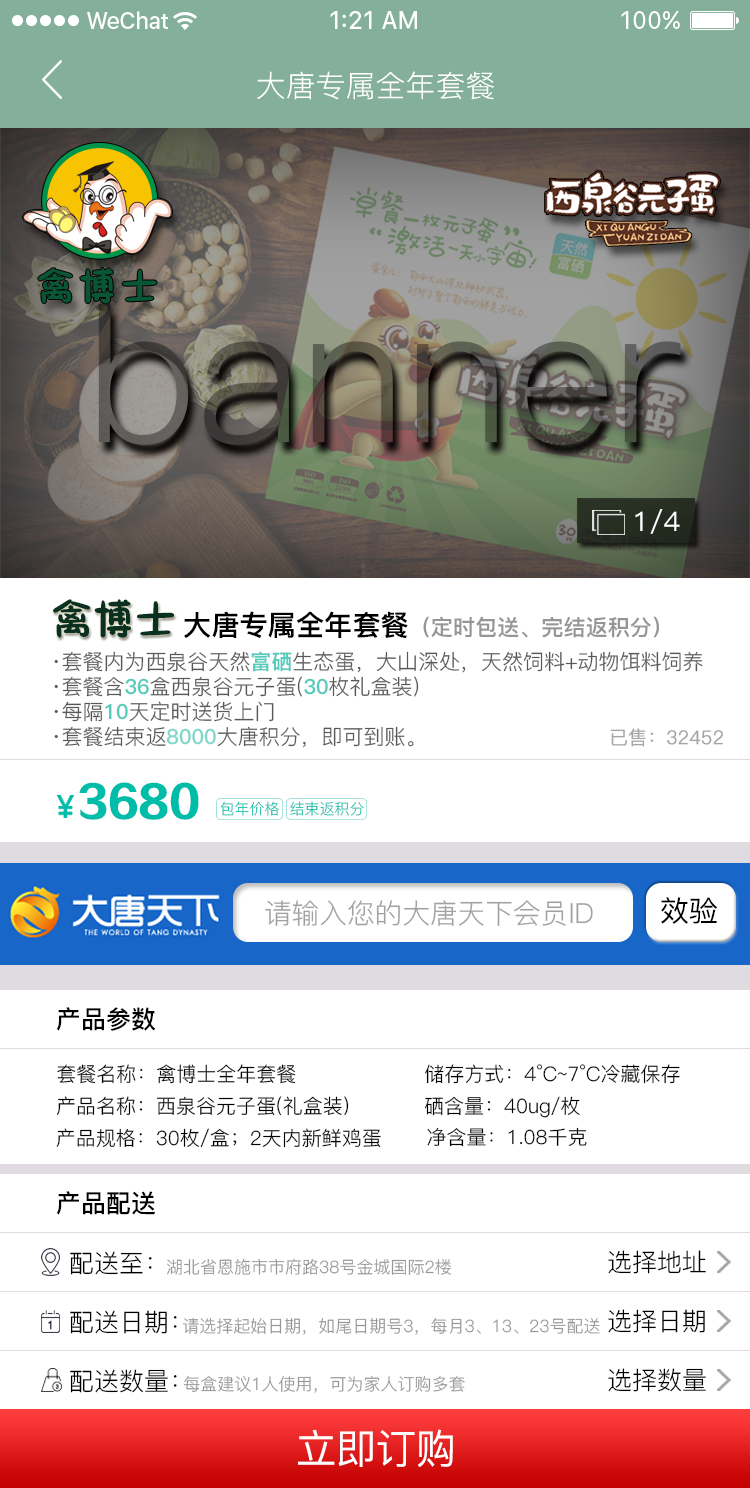
<style>
.page{position:relative;width:750px;height:1488px;background:#ffffff}
.page>*{position:absolute;margin:0}
.t1{font:30px "PingFang-SC-Regular";color:#ffffff;text-transform:uppercase}
.t2{font:189.4px "PingFang-SC-Regular"}
.t3{font:26.8px "PingFang-SC-Medium";color:#ffffff;scale:1.04 1}
.t4{font:42.2px "FZSEJW--GB1-0";color:#0a3020}
.t5{font:22px "PingFang-SC-Heavy";color:#969696}
.t6{font:28.1px "PingFang-SC-Heavy";color:#000000}
.t7{font:20.9px/25px "PingFang-SC-Regular"}
.t8{font:20.9px/25px "PingFang-SC-Heavy"}
.t9{font:18.9px "PingFang-SC-Regular";color:#a5a5a5;font-weight:bold}
.t10{font:42.4px "FZZDHJW--GB1-0";color:#00bdaa}
.t11{font:15px "PingFang-SC-Regular";color:#00bdaa}
.t12{font:15px "PingFang-SC-Regular"}
.t13{font:27.7px "PingFang-SC-Regular";color:#a1a1a1}
.t14{font:28.9px "PingFang-SC-Medium";color:#000000}
.t15{font:25px "PingFang-SC-Bold";color:#000000}
.t16{font:20px "PingFang-SC-Regular";color:#000000}
.t17{font:19.8px "PingFang-SC-Regular";color:#000000}
.t18{font:19.7px "PingFang-SC-Regular";color:#000000}
.t19{font:19.5px "PingFang-SC-Regular";color:#000000}
.t20{font:25px "PingFang-SC-Regular";color:#000000}
.t21{font:17px "PingFang-SC-Regular";color:#969696}
.t22{font:40.7px "PingFang-SC-Medium";color:#ffffff}
</style>
<div class="page">
<p class="t1" style="left:257px;top:71px;width:237px;height:29px">大唐专属全年套餐</p>
<p class="t2" style="left:98px;top:304px;width:583px;height:141px">banner</p>
<p class="t3" style="left:635px;top:509px;width:45px;height:25px">1/4</p>
<p class="t4" style="left:53px;top:599px;width:121px;height:39px">禽博士</p>
<p class="t5" style="left:184px;top:611px;width:475px;height:27px"><span class="t6">大唐专属全年套餐</span>（定时包送、完结返积分）</p>
<p class="t7" style="left:54px;top:651px;width:649px;height:97px">·套餐内为西泉谷天然<span class="t8">富硒</span>生态蛋，大山深处，天然饲料+动物饵料饲养<br>·套餐含<span class="t8">36</span>盒西泉谷元子蛋(<span class="t8">30</span>枚礼盒装)<br>·每隔<span class="t8">10</span>天定时送货上门<br>·套餐结束返<span class="t8">8000</span>大唐积分，即可到账。</p>
<p class="t9" style="left:610px;top:728px;width:113px;height:19px">已售：32452</p>
<p class="t10" style="left:79px;top:782px;width:120px;height:38px">3680</p>
<p class="t11" style="left:220px;top:801px;width:59px;height:15px">包年价格</p>
<p class="t12" style="left:290px;top:801px;width:74px;height:15px">结束返积分</p>
<p class="t13" style="left:265px;top:900px;width:328px;height:26px">请输入您的大唐天下会员ID</p>
<p class="t14" style="left:661px;top:897px;width:56px;height:27px">效验</p>
<p class="t15" style="left:56px;top:1007px;width:100px;height:24px">产品参数</p>
<p class="t16" style="left:57px;top:1064px;width:239px;height:20px">套餐名称：禽博士全年套餐</p>
<p class="t16" style="left:425px;top:1064px;width:255px;height:20px">储存方式：4°C~7°C冷藏保存</p>
<p class="t17" style="left:56px;top:1096px;width:293px;height:20px">产品名称：西泉谷元子蛋(礼盒装)</p>
<p class="t17" style="left:424px;top:1096px;width:156px;height:22px">硒含量：40ug/枚</p>
<p class="t18" style="left:56px;top:1128px;width:325px;height:20px">产品规格：30枚/盒；2天内新鲜鸡蛋</p>
<p class="t19" style="left:427px;top:1127px;width:160px;height:20px">净含量：1.08千克</p>
<p class="t15" style="left:56px;top:1191px;width:99px;height:24px">产品配送</p>
<p class="t20" style="left:70px;top:1251px;width:82px;height:24px">配送至：</p>
<p class="t20" style="left:608px;top:1250px;width:98px;height:24px">选择地址</p>
<p class="t21" style="left:167px;top:1258px;width:284px;height:17px">湖北省恩施市市府路38号金城国际2楼</p>
<p class="t20" style="left:70px;top:1310px;width:107px;height:24px">配送日期：</p>
<p class="t20" style="left:608px;top:1309px;width:97px;height:24px">选择日期</p>
<p class="t21" style="left:182px;top:1317px;width:418px;height:18px">请选择起始日期，如尾日期号3，每月3、13、23号配送</p>
<p class="t20" style="left:70px;top:1369px;width:107px;height:24px">配送数量：</p>
<p class="t20" style="left:608px;top:1368px;width:98px;height:24px">选择数量</p>
<p class="t21" style="left:183px;top:1375px;width:282px;height:18px">每盒建议1人使用，可为家人订购多套</p>
<p class="t22" style="left:298px;top:1429px;width:155px;height:38px">立即订购</p>
</div>
